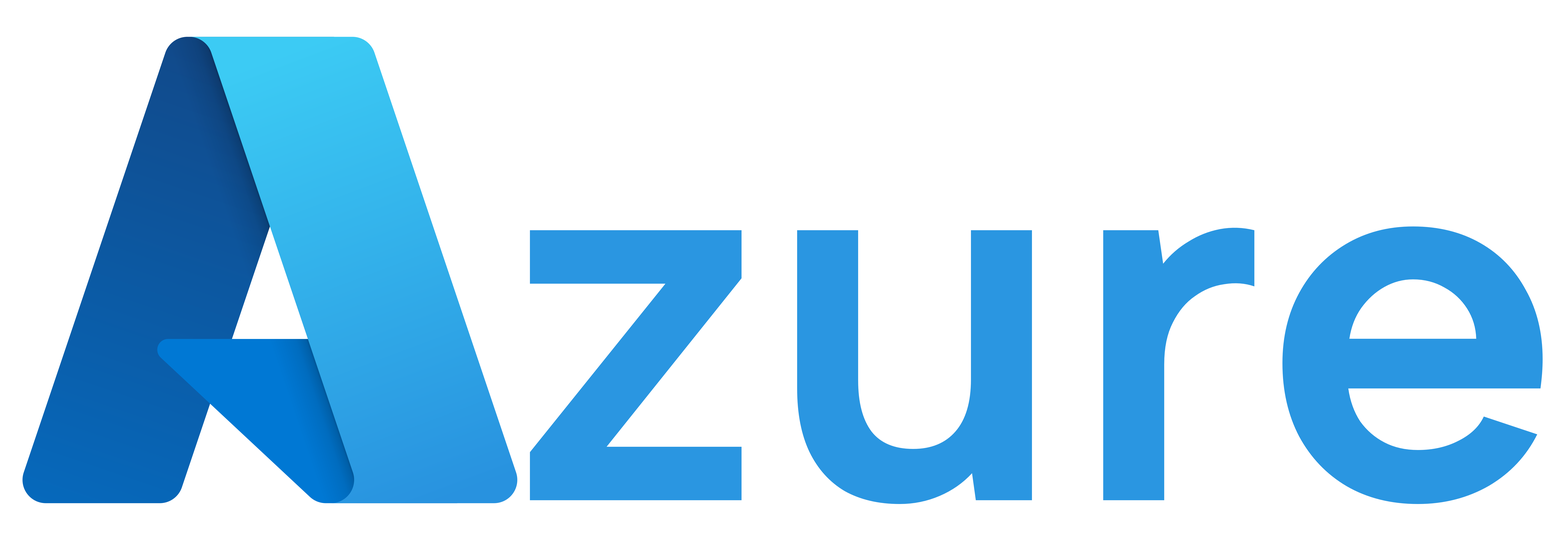
<style>
.page{position:relative;width:1568px;height:540px;background:#ffffff}
.page>*{position:absolute;margin:0}
.t1{font:539.8px "AlbertSans-SemiBold";color:#2a96e1}
</style>
<div class="page">
<p class="t1" style="left:530px;top:226px;width:1013px;height:278px">zure</p>
</div>
